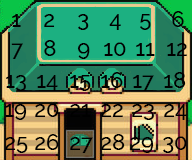
<style>
.page{position:relative;width:192px;height:160px}
.page>*{position:absolute;margin:0}
.t1{font:21.9px "Raleway-Medium";color:#000000}
</style>
<div class="page">
<p class="t1" style="left:12px;top:14px;width:9px;height:13px">1</p>
<p class="t1" style="left:44px;top:14px;width:11px;height:13px">2</p>
<p class="t1" style="left:78px;top:14px;width:11px;height:16px">3</p>
<p class="t1" style="left:109px;top:14px;width:12px;height:16px">4</p>
<p class="t1" style="left:140px;top:14px;width:11px;height:16px">5</p>
<p class="t1" style="left:172px;top:11px;width:12px;height:16px">6</p>
<p class="t1" style="left:44px;top:40px;width:12px;height:16px">8</p>
<p class="t1" style="left:11px;top:43px;width:12px;height:16px">7</p>
<p class="t1" style="left:77px;top:43px;width:13px;height:16px">9</p>
<p class="t1" style="left:104px;top:42px;width:22px;height:14px">10</p>
<p class="t1" style="left:136px;top:43px;width:19px;height:13px">11</p>
<p class="t1" style="left:167px;top:43px;width:20px;height:13px">12</p>
<p class="t1" style="left:6px;top:75px;width:20px;height:16px">13</p>
<p class="t1" style="left:37px;top:75px;width:21px;height:16px">14</p>
<p class="t1" style="left:70px;top:75px;width:21px;height:16px">15</p>
<p class="t1" style="left:101px;top:72px;width:22px;height:16px">16</p>
<p class="t1" style="left:133px;top:75px;width:21px;height:16px">17</p>
<p class="t1" style="left:164px;top:72px;width:22px;height:16px">18</p>
<p class="t1" style="left:5px;top:104px;width:22px;height:16px">19</p>
<p class="t1" style="left:35px;top:103px;width:24px;height:14px">20</p>
<p class="t1" style="left:101px;top:104px;width:22px;height:13px">22</p>
<p class="t1" style="left:132px;top:104px;width:22px;height:16px">23</p>
<p class="t1" style="left:164px;top:104px;width:23px;height:16px">24</p>
<p class="t1" style="left:5px;top:137px;width:23px;height:16px">25</p>
<p class="t1" style="left:35px;top:134px;width:24px;height:16px">26</p>
<p class="t1" style="left:70px;top:137px;width:23px;height:16px">27</p>
<p class="t1" style="left:101px;top:134px;width:24px;height:16px">28</p>
<p class="t1" style="left:130px;top:137px;width:24px;height:16px">29</p>
<p class="t1" style="left:163px;top:136px;width:24px;height:17px">30</p>
</div>
